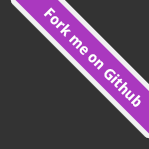
<style>
.page{position:relative;width:149px;height:149px;background:#333333}
.page>*{position:absolute;margin:0}
.t1{font:15px "DroidSans-Bold";letter-spacing:-0.01em;color:#ffffff}
</style>
<div class="page">
<p class="t1" style="left:43px;top:7px;width:98px;height:100px;rotate:45deg">Fork me on Github</p>
</div>
